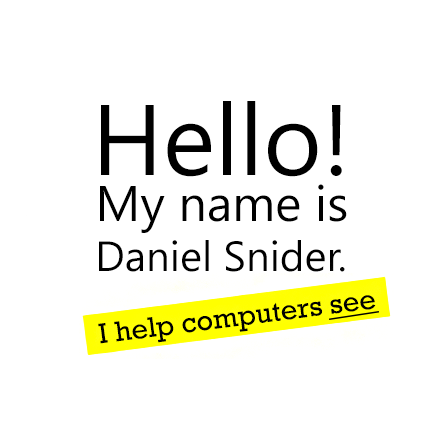
<style>
.page{position:relative;width:430px;height:430px;background:#ffffff}
.page>*{position:absolute;margin:0}
.t1{font:100px "NirmalaUI";color:#000000}
.t2{font:50px "NirmalaUI";color:#000000}
.t3{font:42px "NirmalaUI";color:#000000}
.t4{font:29px "Rockwell";color:#000000}
</style>
<div class="page">
<p class="t1" style="left:101px;top:101px;width:241px;height:76px">Hello!</p>
<p class="t2" style="left:100px;top:184px;width:247px;height:49px">My name is</p>
<p class="t3" style="left:99px;top:240px;width:246px;height:32px">Daniel Snider.</p>
<p class="t4" style="left:98px;top:295px;width:278px;height:49px;rotate:-7deg">I help computers see</p>
</div>
